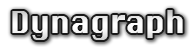
<style>
.page{position:relative;width:195px;height:52px;background:#ffffff}
.page>*{position:absolute;margin:0}
.t1{font:30px "Silom";color:#f5f5f5}
</style>
<div class="page">
<p class="t1" style="left:12px;top:10px;width:171px;height:30px">Dynagraph</p>
</div>
